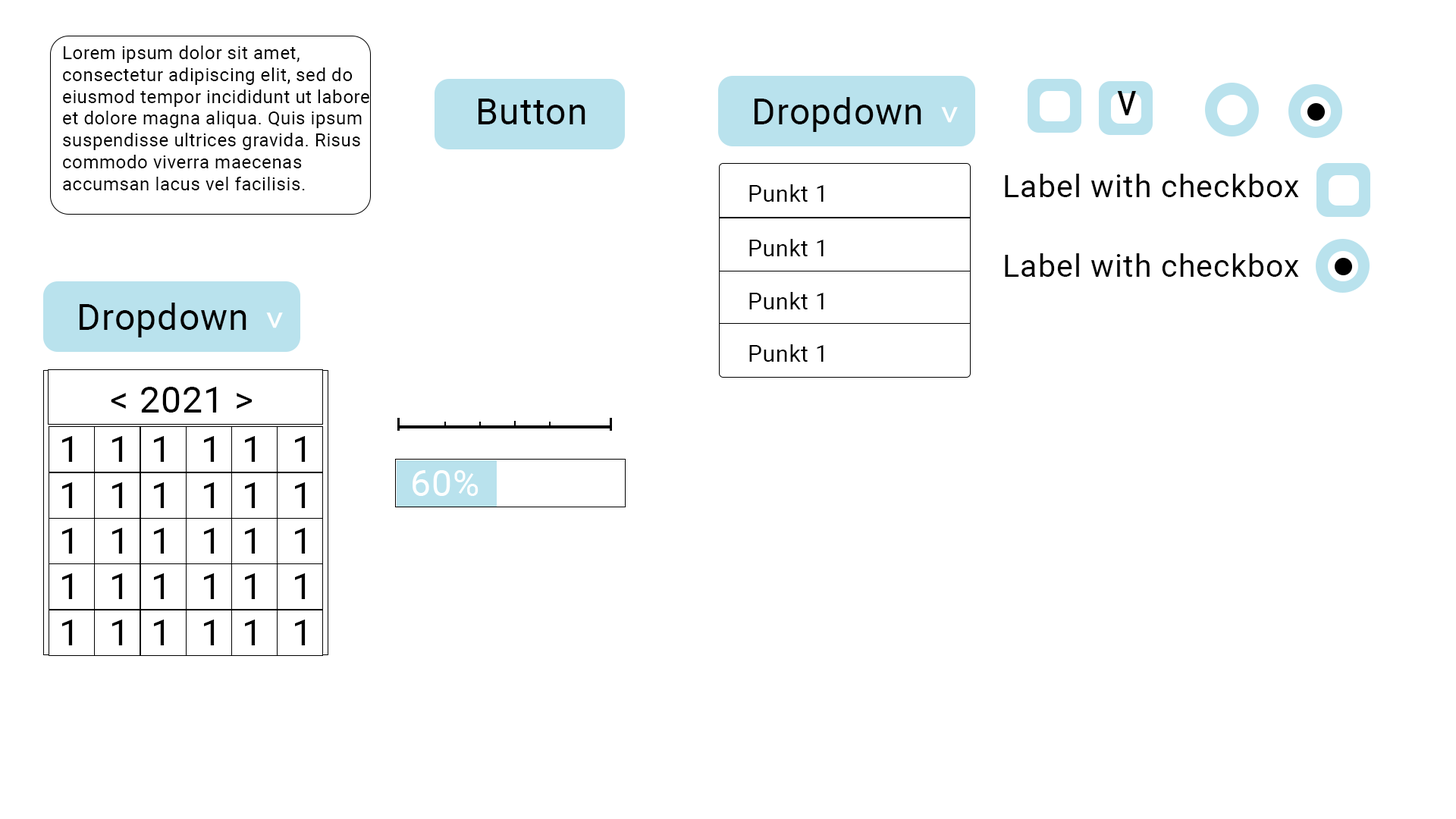
<style>
.page{position:relative;width:1456px;height:819px;background:#ffffff}
.page>*{position:absolute;margin:0}
.t1{font:18.2px "Roboto-Regular";letter-spacing:0.025em;color:#000000}
.t2{font:36.4px "Roboto-Regular";letter-spacing:0.025em;color:#000000}
.t3{font:41.6px "Roboto-Regular";letter-spacing:0.025em;color:#000000;scale:1.39 1}
.t4{font:36.4px "Roboto-Regular";letter-spacing:0.025em;color:#ffffff}
.t5{font:31.4px "Roboto-Regular";letter-spacing:0.025em;color:#000000}
.t6{font:22.7px "Roboto-Regular";letter-spacing:0.025em;color:#000000}
</style>
<div class="page">
<p class="t1" style="left:63px;top:45px;width:306px;height:145px">Lorem ipsum dolor sit amet, consectetur adipiscing elit, sed do eiusmod tempor incididunt ut labore et dolore magna aliqua. Quis ipsum suspendisse ultrices gravida. Risus commodo viverra maecenas accumsan lacus vel facilisis.</p>
<p class="t2" style="left:479px;top:99px;width:106px;height:25px">Button</p>
<p class="t2" style="left:755px;top:97px;width:166px;height:35px">Dropdown</p>
<p class="t3" style="left:1117px;top:91px;width:19px;height:24px;rotate:90deg">&gt;</p>
<p class="t4" style="left:941px;top:107px;width:17px;height:16px;rotate:90deg">&gt;</p>
<p class="t5" style="left:1005px;top:174px;width:294px;height:23px">Label with checkbox</p>
<p class="t6" style="left:749px;top:184px;width:75px;height:18px">Punkt 1</p>
<p class="t6" style="left:749px;top:239px;width:75px;height:17px">Punkt 1</p>
<p class="t5" style="left:1005px;top:253px;width:294px;height:24px">Label with checkbox</p>
<p class="t6" style="left:749px;top:292px;width:75px;height:17px">Punkt 1</p>
<p class="t2" style="left:80px;top:303px;width:166px;height:34px">Dropdown</p>
<p class="t4" style="left:266px;top:312px;width:17px;height:16px;rotate:90deg">&gt;</p>
<p class="t6" style="left:749px;top:344px;width:75px;height:18px">Punkt 1</p>
<p class="t2" style="left:111px;top:387px;width:142px;height:26px">&lt; 2021 &gt;</p>
<p class="t2" style="left:62px;top:436px;width:11px;height:26px">1</p>
<p class="t2" style="left:112px;top:436px;width:11px;height:26px">1</p>
<p class="t2" style="left:154px;top:436px;width:11px;height:26px">1</p>
<p class="t2" style="left:204px;top:436px;width:11px;height:26px">1</p>
<p class="t2" style="left:245px;top:436px;width:11px;height:26px">1</p>
<p class="t2" style="left:295px;top:436px;width:11px;height:26px">1</p>
<p class="t4" style="left:413px;top:470px;width:66px;height:26px">60%</p>
<p class="t2" style="left:62px;top:482px;width:11px;height:26px">1</p>
<p class="t2" style="left:112px;top:482px;width:11px;height:26px">1</p>
<p class="t2" style="left:154px;top:482px;width:11px;height:26px">1</p>
<p class="t2" style="left:204px;top:482px;width:11px;height:26px">1</p>
<p class="t2" style="left:245px;top:482px;width:11px;height:26px">1</p>
<p class="t2" style="left:295px;top:482px;width:11px;height:26px">1</p>
<p class="t2" style="left:62px;top:528px;width:11px;height:26px">1</p>
<p class="t2" style="left:112px;top:528px;width:11px;height:26px">1</p>
<p class="t2" style="left:154px;top:528px;width:11px;height:26px">1</p>
<p class="t2" style="left:204px;top:528px;width:11px;height:26px">1</p>
<p class="t2" style="left:245px;top:528px;width:11px;height:26px">1</p>
<p class="t2" style="left:295px;top:528px;width:11px;height:26px">1</p>
<p class="t2" style="left:62px;top:573px;width:11px;height:26px">1</p>
<p class="t2" style="left:112px;top:573px;width:11px;height:26px">1</p>
<p class="t2" style="left:154px;top:573px;width:11px;height:26px">1</p>
<p class="t2" style="left:204px;top:573px;width:11px;height:26px">1</p>
<p class="t2" style="left:245px;top:573px;width:11px;height:26px">1</p>
<p class="t2" style="left:295px;top:573px;width:11px;height:26px">1</p>
<p class="t2" style="left:62px;top:620px;width:11px;height:25px">1</p>
<p class="t2" style="left:112px;top:620px;width:11px;height:25px">1</p>
<p class="t2" style="left:154px;top:620px;width:11px;height:25px">1</p>
<p class="t2" style="left:204px;top:620px;width:11px;height:25px">1</p>
<p class="t2" style="left:245px;top:620px;width:11px;height:25px">1</p>
<p class="t2" style="left:295px;top:620px;width:11px;height:25px">1</p>
</div>
